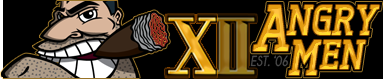
<style>
.page{position:relative;width:383px;height:79px;background:#000000}
.page>*{position:absolute;margin:0}
.t1{font:43.2px "Tertre-ExtraBold";font-style:italic;scale:0.83 1}
.t2{font:66px "Tertre-ExtraBold";letter-spacing:-0.05em;font-style:italic;scale:0.83 1}
.t3{font:42px "Tertre-ExtraBold";letter-spacing:0.05em;font-style:italic;scale:0.83 1}
.t4{font:50.4px "Tertre-ExtraBold";letter-spacing:0.04em;font-style:italic;scale:0.83 1}
.t5{font:14.4px "Champagne&Limousines-Bold";color:#4a4a4a;font-style:italic;scale:0.83 1}
</style>
<div class="page">
<p class="t1" style="left:253px;top:5px;width:127px;height:46px"><span class="t2">A</span>NGRY</p>
<p class="t3" style="left:288px;top:40px;width:78px;height:35px"><span class="t4">M</span>EN</p>
<p class="t5" style="left:250px;top:55px;width:38px;height:12px">EST. ‘06</p>
</div>
